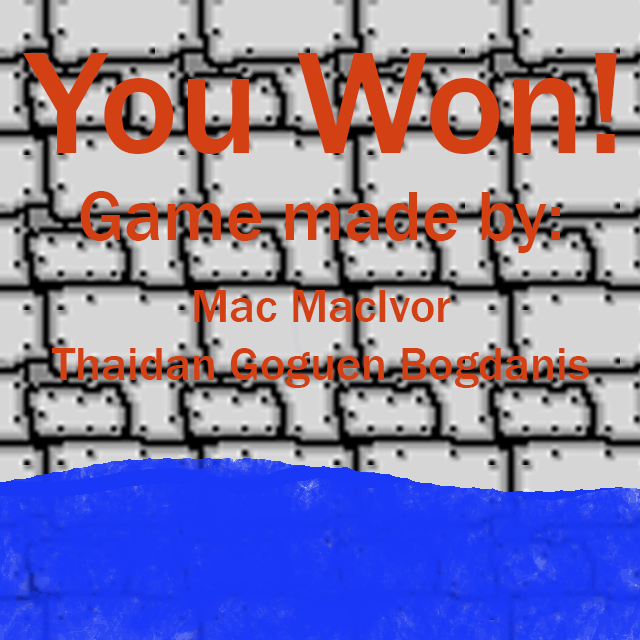
<style>
.page{position:relative;width:640px;height:640px}
.page>*{position:absolute;margin:0}
.t1{font:150px "FranklinGothic-Medium";color:#d34013}
.t2{font:72px "FranklinGothic-Medium";color:#d34013}
.t3{font:48px "FranklinGothic-Medium";color:#d34013}
</style>
<div class="page">
<p class="t1" style="left:23px;top:53px;width:594px;height:101px">You Won!</p>
<p class="t2" style="left:80px;top:191px;width:480px;height:62px">Game made by:</p>
<p class="t3" style="left:52px;top:290px;width:537px;height:98px;text-align:center">Mac MacIvor<br>Thaidan Goguen Bogdanis</p>
</div>
